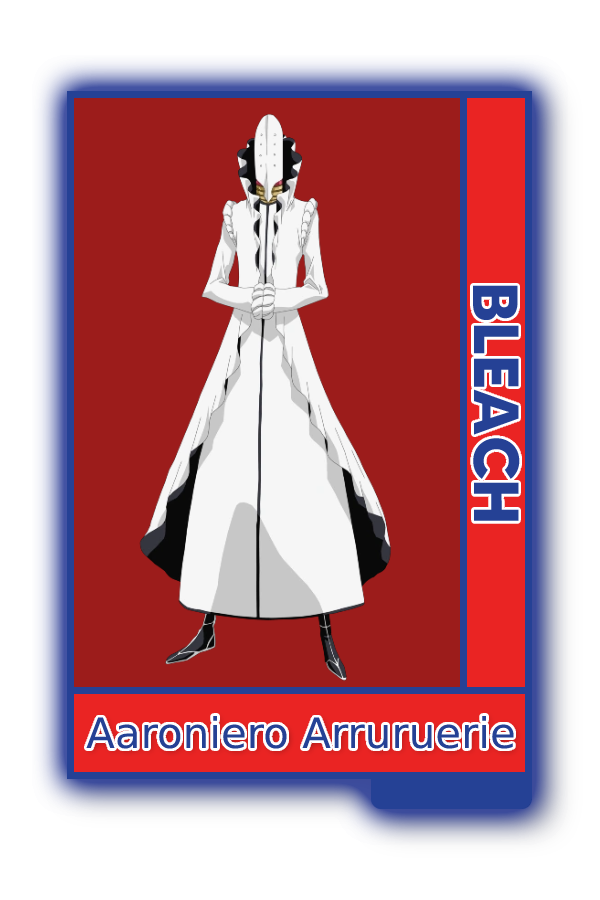
<style>
.page{position:relative;width:600px;height:900px;background:#9c1c1b}
.page>*{position:absolute;margin:0}
.t1{font:63.6px "MADETOMMY-Bold";color:#254195}
.t2{font:42px "CoolveticaRg-Regular";color:#254195}
</style>
<div class="page">
<p class="t1" style="left:473px;top:285px;width:47px;height:236px;rotate:90deg">BLEACH</p>
<p class="t2" style="left:86px;top:716px;width:428px;height:33px">Aaroniero Arruruerie</p>
</div>
